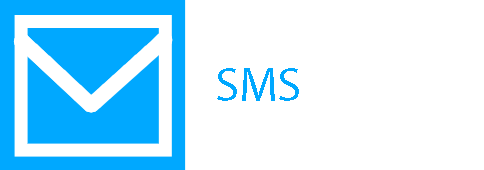
<style>
.page{position:relative;width:484px;height:170px;background:#ffffff}
.page>*{position:absolute;margin:0}
.t1{font:48px "MyriadPro-Regular";color:#00a8ff}
</style>
<div class="page">
<p class="t1" style="left:217px;top:68px;width:82px;height:33px">SMS</p>
</div>
